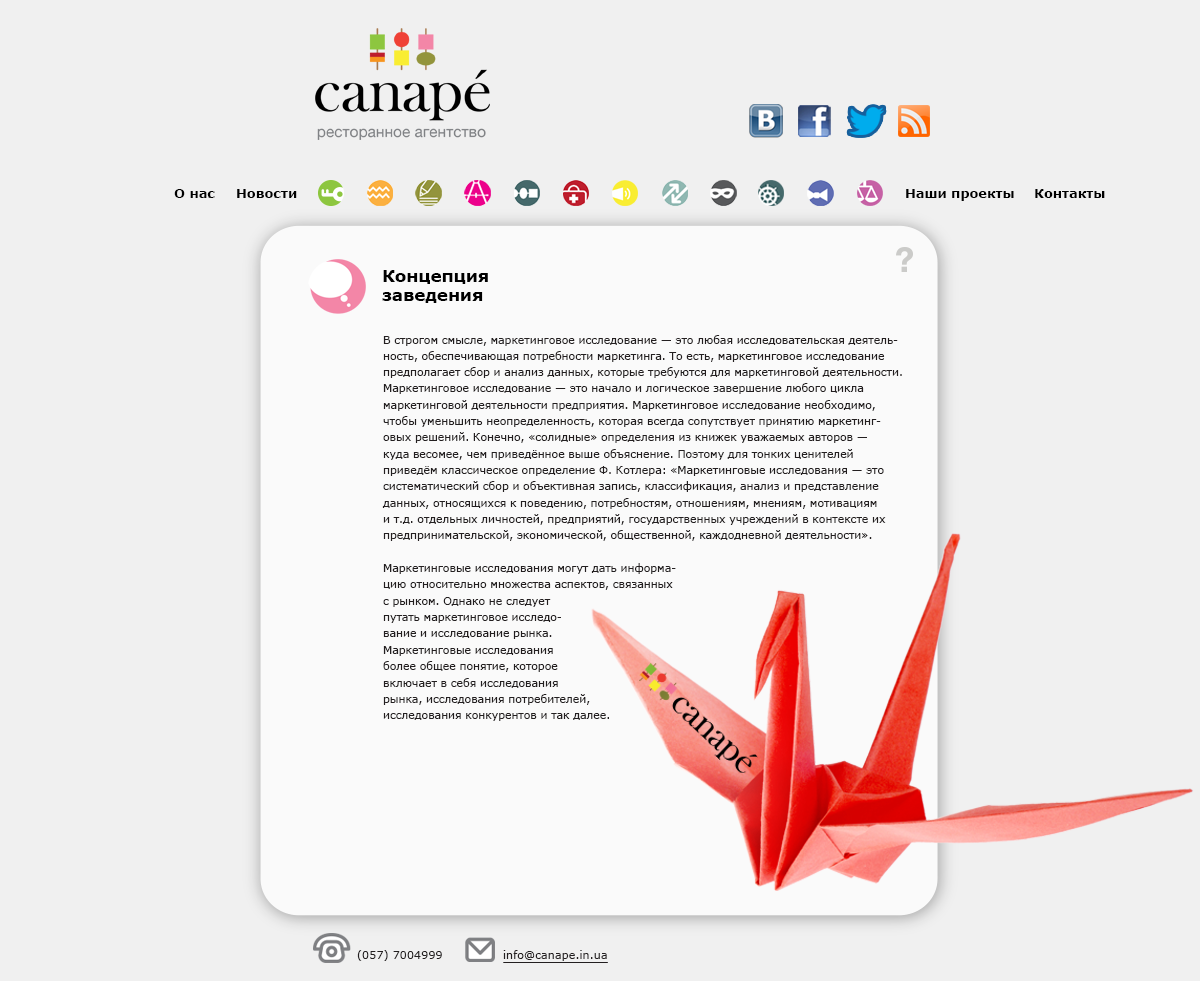
<style>
.page{position:relative;width:1200px;height:981px;background:#f0f0f0}
.page>*{position:absolute;margin:0}
.t1{font:12.9px "Verdana-Bold";color:#000000}
.t2{font:16.7px/19px "Verdana-Bold";color:#000000}
.t3{font:11.2px/16.3px "Verdana";letter-spacing:-0.02em;color:#231f20}
.t4{font:11.2px "Verdana";color:#231f20}
</style>
<div class="page">
<p class="t1" style="left:174px;top:189px;width:41px;height:9px">О нас</p>
<p class="t1" style="left:237px;top:189px;width:60px;height:9px">Новости</p>
<p class="t1" style="left:906px;top:189px;width:108px;height:12px">Наши проекты</p>
<p class="t1" style="left:1035px;top:189px;width:70px;height:9px">Контакты</p>
<p class="t2" style="left:382px;top:270px;width:106px;height:33px">Концепция<br>заведения</p>
<p class="t3" style="left:382px;top:335px;width:520px;height:386px">В строгом смысле, маркетинговое исследование — это любая исследовательская деятель-<br>ность, обеспечивающая потребности маркетинга. То есть, маркетинговое исследование<br>предполагает сбор и анализ данных, которые требуются для маркетинговой деятельности.<br>Маркетинговое исследование — это начало и логическое завершение любого цикла<br>маркетинговой деятельности предприятия. Маркетинговое исследование необходимо,<br>чтобы уменьшить неопределенность, которая всегда сопутствует принятию маркетинг-<br>овых решений. Конечно, «солидные» определения из книжек уважаемых авторов —<br>куда весомее, чем приведённое выше объяснение. Поэтому для тонких ценителей<br>приведём классическое определение Ф. Котлера: «Маркетинговые исследования — это<br>систематический сбор и объективная запись, классификация, анализ и представление<br>данных, относящихся к поведению, потребностям, отношениям, мнениям, мотивациям<br>и т.д. отдельных личностей, предприятий, государственных учреждений в контексте их<br>предпринимательской, экономической, общественной, каждодневной деятельности».<br><br>Маркетинговые исследования могут дать информа-<br>цию относительно множества аспектов, связанных<br>с рынком. Однако не следует<br>путать маркетинговое исследо-<br>вание и исследование рынка.<br>Маркетинговые исследования<br>более общее понятие, которое<br>включает в себя исследования<br>рынка, исследования потребителей,<br>исследования конкурентов и так далее.</p>
<p class="t4" style="left:357px;top:950px;width:85px;height:11px">(057) 7004999</p>
<p class="t4" style="left:503px;top:950px;width:104px;height:11px">info@canape.in.ua</p>
</div>
